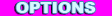
<style>
.page{position:relative;width:112px;height:16px;background:#ff00ff}
.page>*{position:absolute;margin:0}
.t1{font:14.7px "Arial-Black";color:#d6f7ff;scale:1.08 1}
</style>
<div class="page">
<p class="t1" style="left:16px;top:2px;width:80px;height:11px">OPTIONS</p>
</div>
